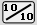
<style>
.page{position:relative;width:37px;height:25px;background:#f0f0f0}
.page>*{position:absolute;margin:0}
.t1{font:9px/9px "Verdana";letter-spacing:-0.075em;color:#000000;font-weight:bold}
</style>
<div class="page">
<p class="t1" style="left:4px;top:4px;width:29px;height:16px">10<br>     10</p>
</div>
